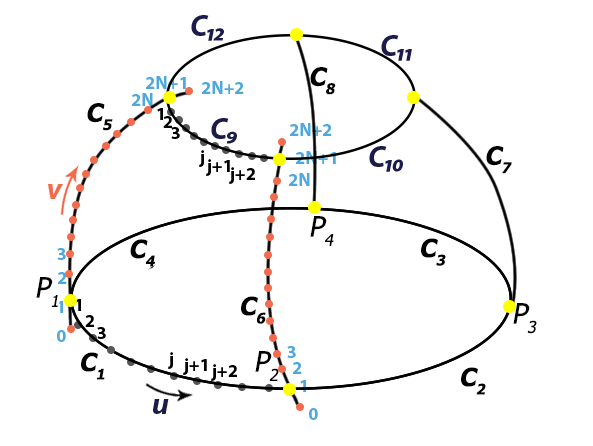
<style>
.page{position:relative;width:593px;height:446px;background:#ffffff}
.page>*{position:absolute;margin:0}
.t1{font:30px "MyriadPro-BoldIt";color:#1c1c4c}
.t2{font:18px "MyriadPro-Bold";color:#4ea8dc}
.t3{font:18px "MyriadPro-Bold";color:#000000}
.t4{font:30px "MyriadPro-BoldIt";color:#f26b4d}
</style>
<div class="page">
<p class="t1" style="left:191px;top:15px;width:33px;height:26px">C12</p>
<p class="t1" style="left:381px;top:35px;width:31px;height:26px">C11</p>
<p class="t2" style="left:146px;top:76px;width:40px;height:13px">2N+1</p>
<p class="t2" style="left:202px;top:81px;width:42px;height:13px">2N+2</p>
<p class="t2" style="left:132px;top:93px;width:21px;height:13px">2N</p>
<p class="t3" style="left:157px;top:108px;width:6px;height:12px">1</p>
<p class="t3" style="left:163px;top:116px;width:9px;height:12px">2</p>
<p class="t1" style="left:211px;top:118px;width:26px;height:26px">C9</p>
<p class="t2" style="left:290px;top:123px;width:42px;height:13px">2N+2</p>
<p class="t3" style="left:171px;top:127px;width:9px;height:12px">3</p>
<p class="t3" style="left:199px;top:150px;width:5px;height:17px">j</p>
<p class="t1" style="left:369px;top:146px;width:34px;height:26px">C10</p>
<p class="t3" style="left:206px;top:159px;width:24px;height:17px">j+1</p>
<p class="t2" style="left:296px;top:151px;width:40px;height:13px">2N+1</p>
<p class="t3" style="left:229px;top:167px;width:26px;height:17px">j+2</p>
<p class="t2" style="left:289px;top:173px;width:21px;height:13px">2N</p>
<p class="t4" style="left:48px;top:184px;width:15px;height:15px">v</p>
<p class="t2" style="left:57px;top:248px;width:9px;height:12px">3</p>
<p class="t2" style="left:58px;top:272px;width:9px;height:12px">2</p>
<p class="t2" style="left:57px;top:301px;width:6px;height:12px">1</p>
<p class="t3" style="left:75px;top:299px;width:6px;height:12px">1</p>
<p class="t3" style="left:85px;top:315px;width:9px;height:12px">2</p>
<p class="t3" style="left:97px;top:327px;width:9px;height:12px">3</p>
<p class="t2" style="left:57px;top:330px;width:9px;height:12px">0</p>
<p class="t3" style="left:168px;top:352px;width:5px;height:17px">j</p>
<p class="t2" style="left:287px;top:346px;width:9px;height:12px">3</p>
<p class="t3" style="left:183px;top:358px;width:24px;height:17px">j+1</p>
<p class="t3" style="left:211px;top:364px;width:26px;height:17px">j+2</p>
<p class="t2" style="left:293px;top:362px;width:9px;height:12px">2</p>
<p class="t2" style="left:300px;top:380px;width:6px;height:12px">1</p>
<p class="t1" style="left:153px;top:399px;width:16px;height:15px">u</p>
<p class="t2" style="left:309px;top:408px;width:9px;height:12px">0</p>
</div>
